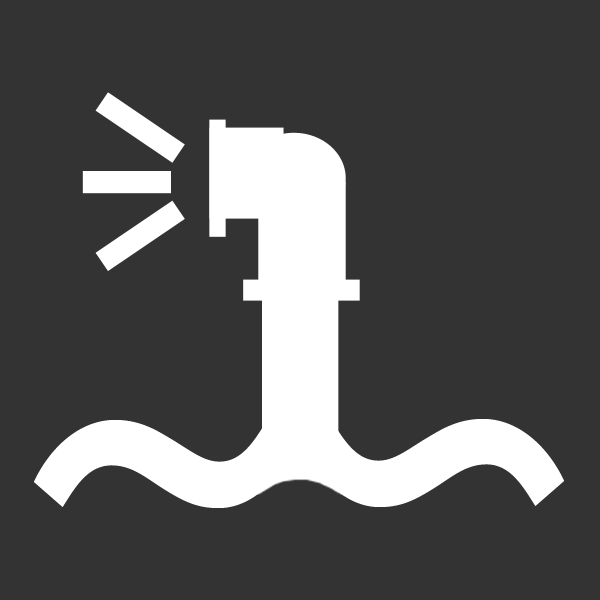
<style>
.page{position:relative;width:600px;height:600px;background:#333333}
.page>*{position:absolute;margin:0}
.t1{font:520.1px "HoboStd";color:#ffffff}
</style>
<div class="page">
<p class="t1" style="left:34px;top:420px;width:261px;height:88px">~</p>
<p class="t1" style="left:303px;top:419px;width:261px;height:88px;rotate:180deg">~</p>
</div>
